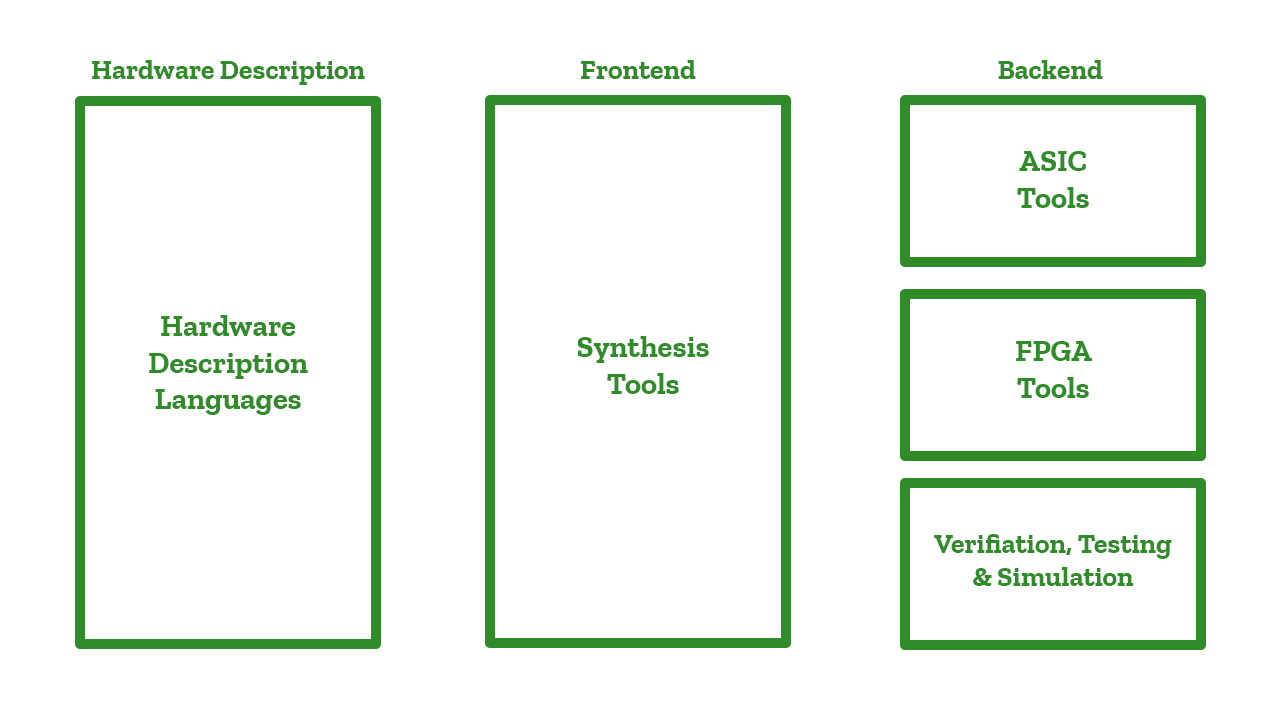
<style>
.page{position:relative;width:1280px;height:724px;background:#ffffff}
.page>*{position:absolute;margin:0}
.t1{font:27.8px "ZillaSlab-Bold";color:#308b29}
.t2{font:30.5px "ZillaSlab-Bold";color:#308b29}
</style>
<div class="page">
<p class="t1" style="left:92px;top:60px;width:273px;height:25px">Hardware Description</p>
<p class="t1" style="left:581px;top:60px;width:115px;height:19px">Frontend</p>
<p class="t1" style="left:998px;top:60px;width:105px;height:19px">Backend</p>
<p class="t2" style="left:1017px;top:151px;width:72px;height:57px;text-align:center">ASIC<br>Tools</p>
<p class="t2" style="left:149px;top:315px;width:159px;height:100px;text-align:center">Hardware Description<br>Languages</p>
<p class="t2" style="left:577px;top:336px;width:132px;height:58px;text-align:center">Synthesis<br>Tools</p>
<p class="t2" style="left:1016px;top:341px;width:76px;height:57px;text-align:center">FPGA<br>Tools</p>
<p class="t1" style="left:934px;top:534px;width:238px;height:52px;text-align:center">Verifiation, Testing &amp; Simulation</p>
</div>
